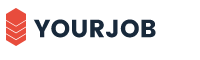
<style>
.page{position:relative;width:200px;height:60px;background:#ffffff}
.page>*{position:absolute;margin:0}
.t1{font:25px "Poppins";color:#18293b}
</style>
<div class="page">
<p class="t1" style="left:33px;top:19px;width:123px;height:19px">YOURJOB</p>
</div>
